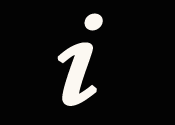
<style>
.page{position:relative;width:175px;height:125px;background:#030303}
.page>*{position:absolute;margin:0}
.t1{font:138.7px "MonotypeCorsiva";letter-spacing:0.075em;color:#fcf8f2;font-weight:bold;scale:1.2 1}
</style>
<div class="page">
<p class="t1" style="left:57px;top:13px;width:46px;height:93px">i</p>
</div>
